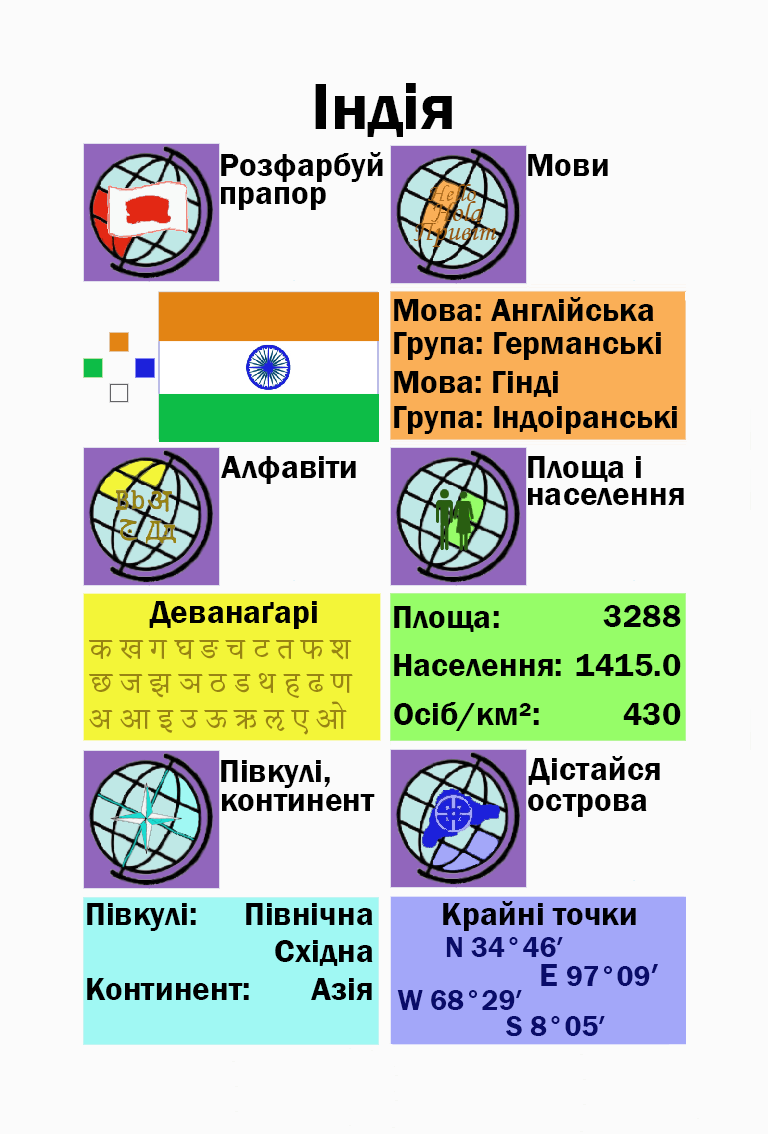
<style>
.page{position:relative;width:768px;height:1134px;background:#fbfbfb}
.page>*{position:absolute;margin:0}
.t1{font:66.7px "FranklinGothic-Demi";color:#000000}
.t2{font:33.3px "FranklinGothic-Demi";color:#000000}
.t3{font:33.3px "FranklinGothic-Demi";color:#000003}
.t4{font:37.5px "AdobeDevanagari-Regular";color:#988413}
.t5{font:29.2px "FranklinGothic-Demi";color:#988413}
.t6{font:29.2px "FranklinGothic-Demi";color:#090c69}
.t7{font:33.3px "FranklinGothic-Demi";color:#090c69}
</style>
<div class="page">
<p class="t1" style="left:315px;top:83px;width:137px;height:54px">Індія</p>
<p class="t2" style="left:221px;top:152px;width:162px;height:30px">Розфарбуй</p>
<p class="t2" style="left:528px;top:154px;width:80px;height:22px">Мови</p>
<p class="t2" style="left:221px;top:187px;width:105px;height:23px">прапор</p>
<p class="t2" style="left:394px;top:297px;width:260px;height:24px">Мова: Англійська</p>
<p class="t2" style="left:394px;top:332px;width:267px;height:28px">Група: Германські</p>
<p class="t2" style="left:394px;top:371px;width:164px;height:26px">Мова: Гінді</p>
<p class="t2" style="left:394px;top:406px;width:283px;height:28px">Група: Індоіранські</p>
<p class="t2" style="left:221px;top:456px;width:135px;height:28px">Алфавіти</p>
<p class="t2" style="left:528px;top:456px;width:113px;height:26px">Площа і</p>
<p class="t2" style="left:528px;top:488px;width:156px;height:17px">населення</p>
<p class="t2" style="left:149px;top:601px;width:168px;height:28px">Деванаґарі</p>
<p class="t2" style="left:394px;top:606px;width:105px;height:26px">Площа:</p>
<p class="t3" style="left:603px;top:605px;width:78px;height:22px">3288</p>
<p class="t4" style="left:89px;top:640px;width:263px;height:20px"><span class="t5"><br></span>क ख ग घ ङ च ट त फ श</p>
<p class="t2" style="left:394px;top:654px;width:167px;height:22px">Населення:</p>
<p class="t2" style="left:576px;top:654px;width:105px;height:22px">1415.0</p>
<p class="t4" style="left:89px;top:673px;width:264px;height:25px">छ ज झ ञ ठ ड थ ह ढ ण</p>
<p class="t4" style="left:89px;top:701px;width:258px;height:34px">अ आ इ उ ऊ ऋ ऌ ए ओ</p>
<p class="t2" style="left:394px;top:702px;width:145px;height:29px">Осіб/км²:</p>
<p class="t2" style="left:623px;top:703px;width:58px;height:22px">430</p>
<p class="t2" style="left:221px;top:760px;width:109px;height:28px">Півкулі,</p>
<p class="t2" style="left:528px;top:756px;width:132px;height:29px">Дістайся</p>
<p class="t2" style="left:222px;top:794px;width:153px;height:17px">континент</p>
<p class="t2" style="left:528px;top:794px;width:119px;height:23px">острова</p>
<p class="t2" style="left:87px;top:903px;width:109px;height:28px">Півкулі:</p>
<p class="t2" style="left:246px;top:903px;width:127px;height:22px">Північна</p>
<p class="t3" style="left:443px;top:901px;width:193px;height:30px">Крайні точки</p>
<p class="t2" style="left:275px;top:940px;width:98px;height:26px">Східна</p>
<p class="t6" style="left:446px;top:937px;width:117px;height:20px">N 34°46′</p>
<p class="t6" style="left:541px;top:964px;width:117px;height:22px"><span class="t7">E </span>97°09<span class="t7">′</span></p>
<p class="t2" style="left:87px;top:978px;width:162px;height:22px">Континент:</p>
<p class="t2" style="left:311px;top:978px;width:61px;height:22px">Азія</p>
<p class="t6" style="left:397px;top:990px;width:125px;height:20px">W 68°29′</p>
<p class="t6" style="left:506px;top:1016px;width:99px;height:21px">S 8°05′</p>
</div>
